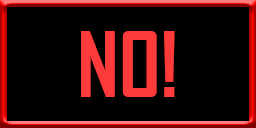
<style>
.page{position:relative;width:256px;height:128px;background:#000000}
.page>*{position:absolute;margin:0}
.t1{font:87px "AgencyFB-Bold";color:#ff3a3a}
</style>
<div class="page">
<p class="t1" style="left:81px;top:31px;width:94px;height:66px">NO!</p>
</div>
